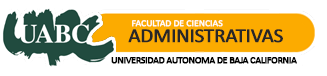
<style>
.page{position:relative;width:327px;height:76px;background:#ffffff}
.page>*{position:absolute;margin:0}
.t1{font:20px "Calibri";letter-spacing:-0.035em;color:#272727;font-weight:bold;scale:1.05 1}
.t2{font:9px "Calibri";letter-spacing:-0.015em;color:#ffffff;font-weight:bold;scale:1.05 1}
.t3{font:10px "Calibri";letter-spacing:-0.055em;color:#000000;font-weight:bold}
</style>
<div class="page">
<p class="t1" style="left:128px;top:29px;width:155px;height:14px">ADMINISTRATIVAS</p>
<p class="t2" style="left:132px;top:20px;width:91px;height:7px">FACULTAD DE CIENCIAS</p>
<p class="t3" style="left:111px;top:57px;width:186px;height:7px">UNIVERSIDAD AUTONOMA DE BAJA CALIFORNIA</p>
</div>
